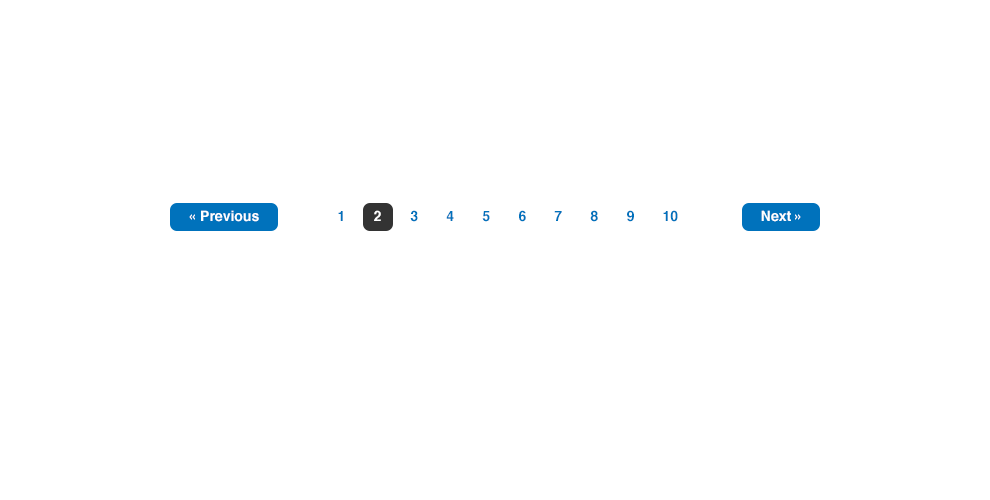
<style>
.page{position:relative;width:990px;height:500px;background:#ffffff}
.page>*{position:absolute;margin:0}
.t1{font:14px "Helvetica-Bold";color:#ffffff}
.t2{font:14px "Helvetica-Bold";color:#0072bc}
</style>
<div class="page">
<p class="t1" style="left:189px;top:210px;width:70px;height:12px">« Previous</p>
<p class="t2" style="left:338px;top:211px;width:5px;height:10px">1</p>
<p class="t1" style="left:374px;top:210px;width:7px;height:11px">2</p>
<p class="t2" style="left:410px;top:210px;width:8px;height:12px">3</p>
<p class="t2" style="left:446px;top:211px;width:8px;height:10px">4</p>
<p class="t2" style="left:482px;top:211px;width:8px;height:11px">5</p>
<p class="t2" style="left:519px;top:210px;width:7px;height:12px">6</p>
<p class="t2" style="left:554px;top:211px;width:8px;height:10px">7</p>
<p class="t2" style="left:590px;top:210px;width:8px;height:12px">8</p>
<p class="t2" style="left:627px;top:210px;width:7px;height:12px">9</p>
<p class="t2" style="left:663px;top:210px;width:15px;height:12px">10</p>
<p class="t1" style="left:761px;top:210px;width:40px;height:12px">Next »</p>
</div>
